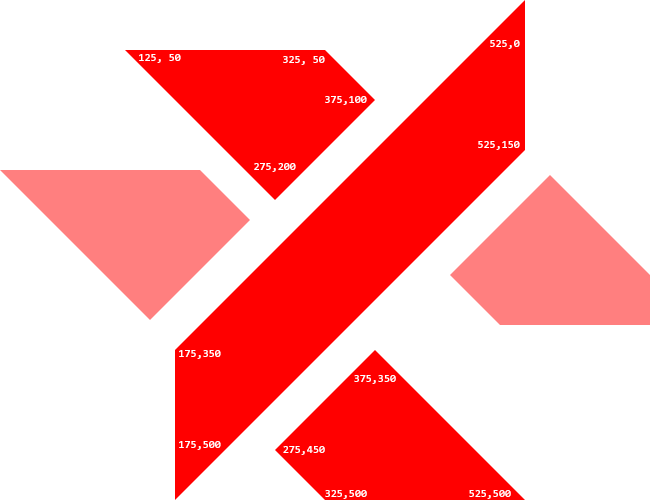
<style>
.page{position:relative;width:650px;height:500px;background:#ffffff}
.page>*{position:absolute;margin:0}
.t1{font:11px "Consolas-Bold";color:#ffffff}
</style>
<div class="page">
<p class="t1" style="left:490px;top:40px;width:30px;height:9px">525,0</p>
<p class="t1" style="left:139px;top:54px;width:42px;height:9px">125, 50</p>
<p class="t1" style="left:283px;top:56px;width:42px;height:9px">325, 50</p>
<p class="t1" style="left:325px;top:96px;width:42px;height:9px">375,100</p>
<p class="t1" style="left:478px;top:141px;width:42px;height:9px">525,150</p>
<p class="t1" style="left:254px;top:163px;width:42px;height:9px">275,200</p>
<p class="t1" style="left:179px;top:350px;width:42px;height:9px">175,350</p>
<p class="t1" style="left:354px;top:375px;width:42px;height:9px">375,350</p>
<p class="t1" style="left:179px;top:441px;width:42px;height:9px">175,500</p>
<p class="t1" style="left:283px;top:446px;width:42px;height:9px">275,450</p>
<p class="t1" style="left:325px;top:490px;width:42px;height:9px">325,500</p>
<p class="t1" style="left:469px;top:490px;width:42px;height:9px">525,500</p>
</div>
